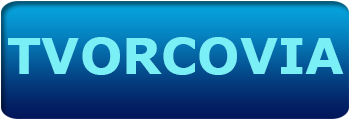
<style>
.page{position:relative;width:350px;height:120px}
.page>*{position:absolute;margin:0}
.t1{font:50px "Verdana-Bold";color:#7aeff6}
</style>
<div class="page">
<p class="t1" style="left:8px;top:37px;width:336px;height:38px">TVORCOVIA</p>
</div>
